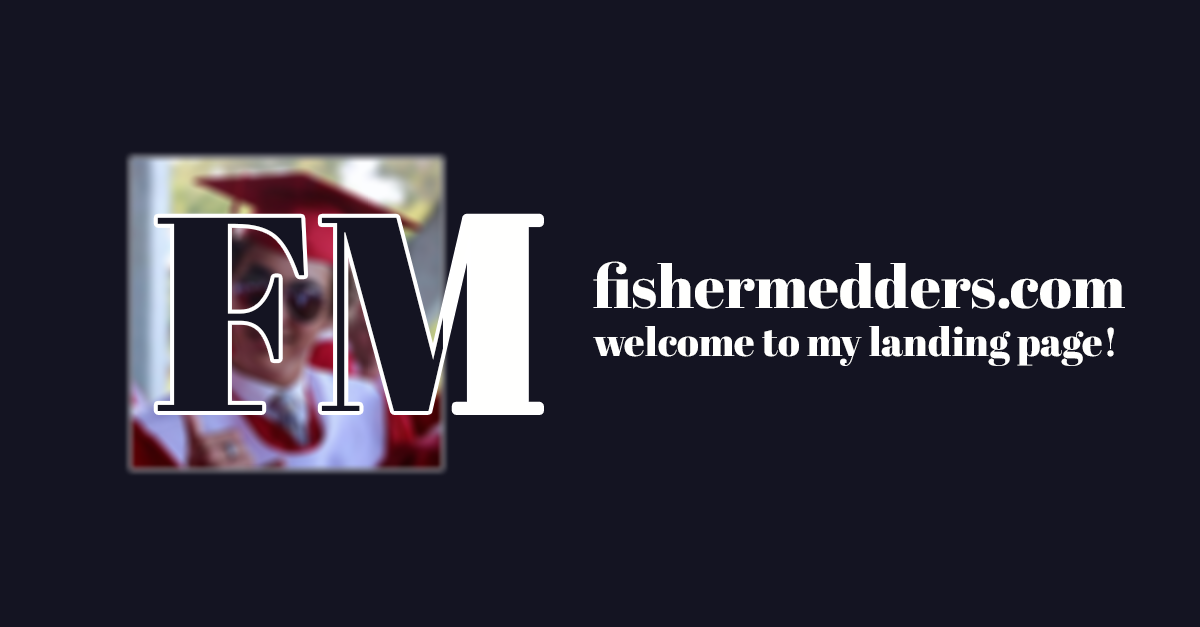
<style>
.page{position:relative;width:1200px;height:627px;background:#141422}
.page>*{position:absolute;margin:0}
.t1{font:40px "AbrilFatface-Regular";color:#fffffe}
.t2{font:60px "AbrilFatface-Regular";color:#fffffe}
</style>
<div class="page">
<p class="t1" style="left:593px;top:261px;width:532px;height:105px"><span class="t2">fishermedders.com<br></span>welcome to my landing page!</p>
</div>
